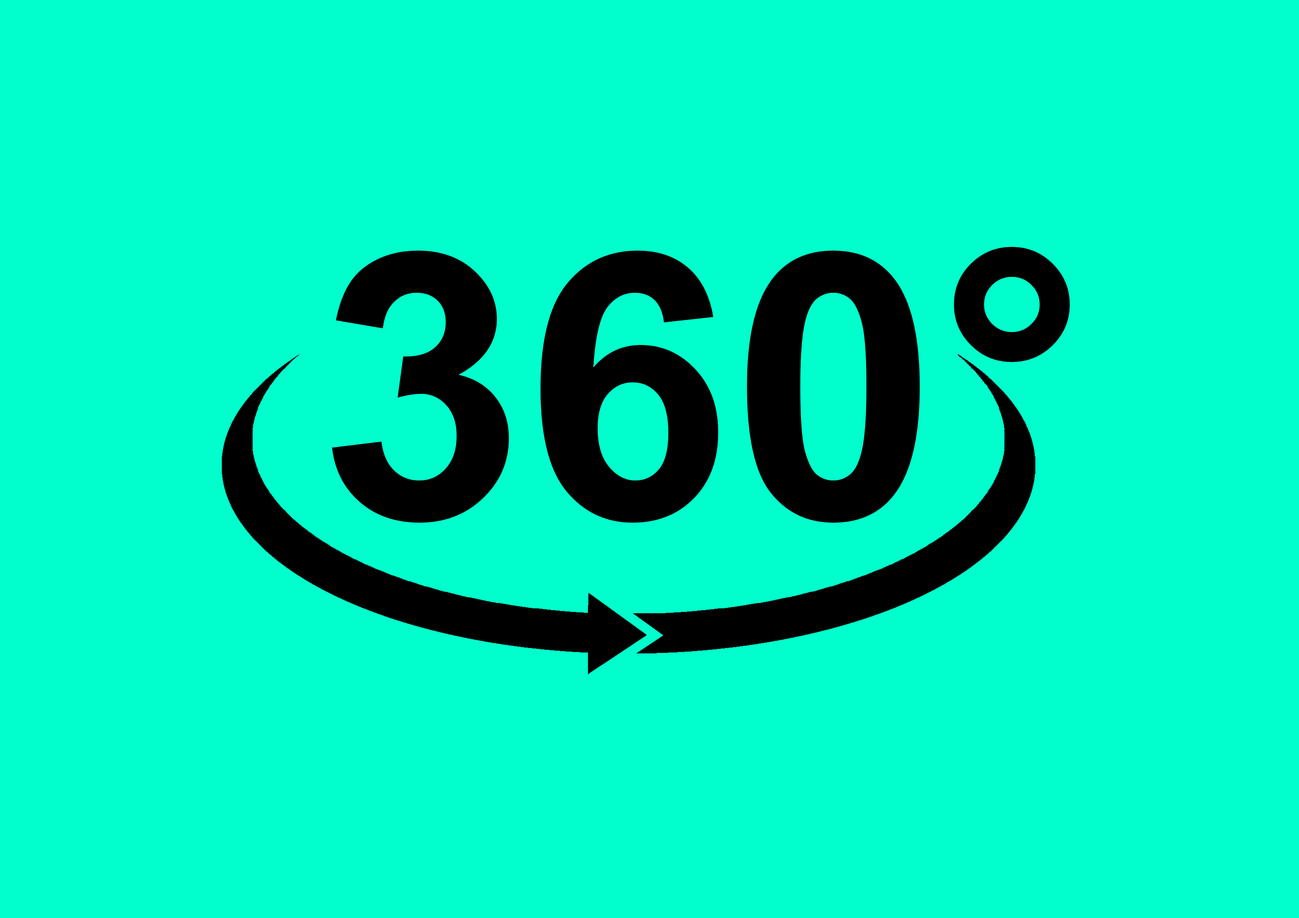
<style>
.page{position:relative;width:1299px;height:918px;background:#00ffcc}
.page>*{position:absolute;margin:0}
.t1{font:371.7px "Arial-BoldMT";color:#000000}
</style>
<div class="page">
<p class="t1" style="left:332px;top:247px;width:738px;height:276px">360°</p>
</div>
